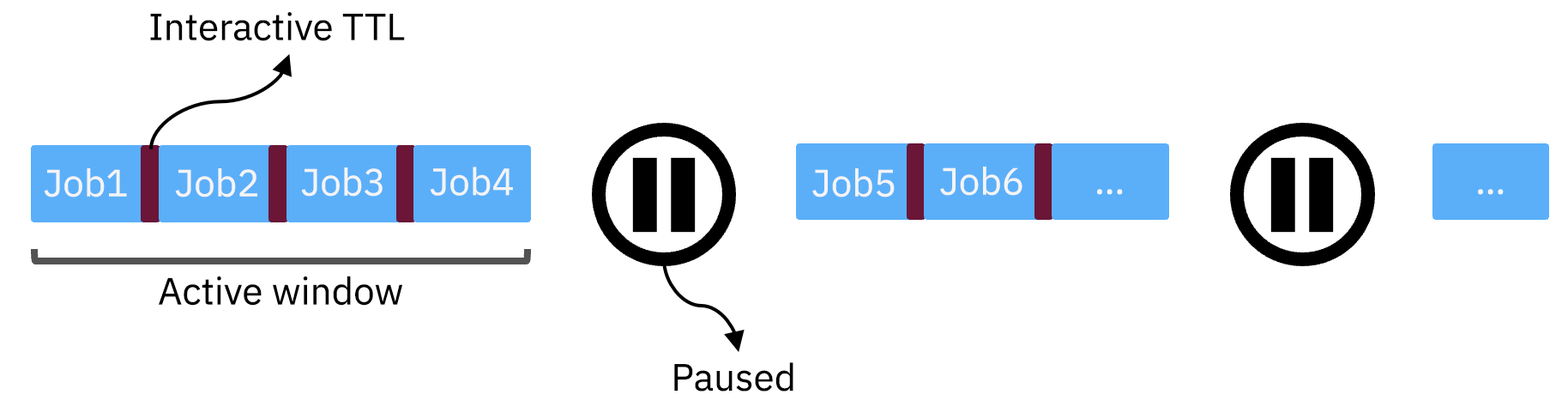
<style>
.page{position:relative;width:1568px;height:407px;background:#ffffff}
.page>*{position:absolute;margin:0}
.t1{font:37.7px "IBMPlexSans-Regular";color:#000000}
.t2{font:37.7px "IBMPlexSans-Regular";color:#f4f4f4}
</style>
<div class="page">
<p class="t1" style="left:150px;top:12px;width:255px;height:29px">Interactive TTL</p>
<p class="t2" style="left:44px;top:168px;width:83px;height:29px">Job1</p>
<p class="t2" style="left:175px;top:168px;width:82px;height:29px">Job2</p>
<p class="t2" style="left:301px;top:167px;width:82px;height:29px">Job3</p>
<p class="t2" style="left:430px;top:166px;width:83px;height:30px">Job4</p>
<p class="t2" style="left:812px;top:168px;width:83px;height:29px">Job5</p>
<p class="t2" style="left:940px;top:166px;width:82px;height:30px">Job6</p>
<p class="t1" style="left:159px;top:275px;width:243px;height:30px">Active window</p>
<p class="t1" style="left:674px;top:362px;width:119px;height:29px">Paused</p>
</div>
